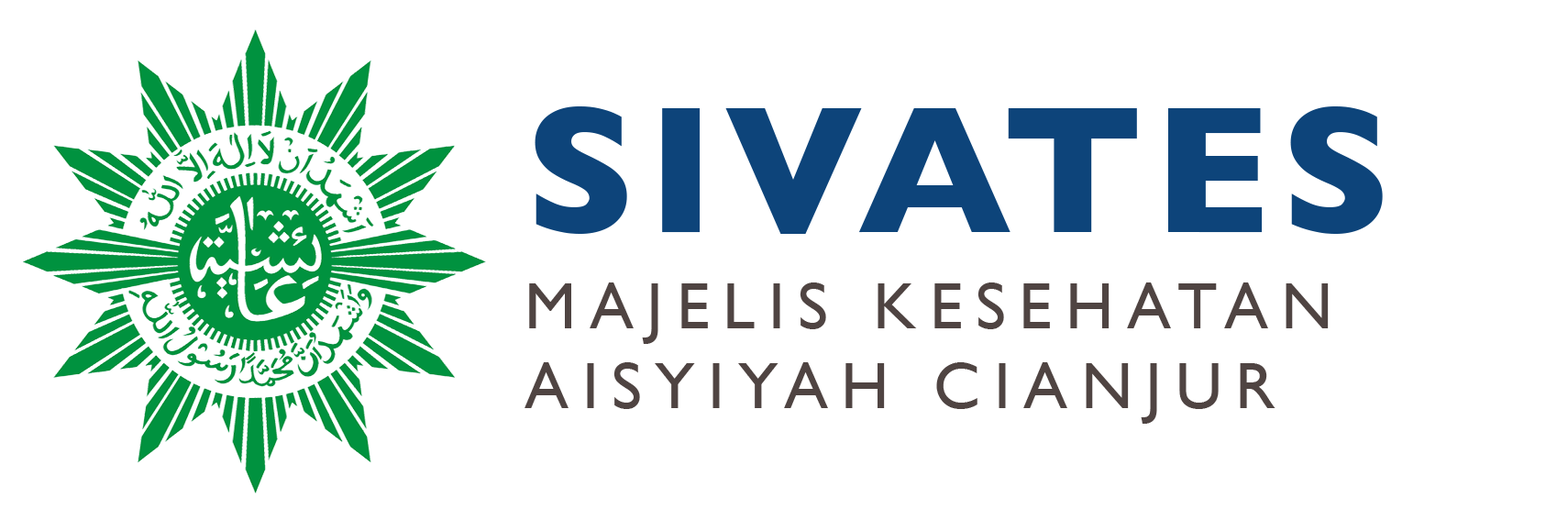
<style>
.page{position:relative;width:1568px;height:520px;background:#ffffff}
.page>*{position:absolute;margin:0}
.t1{font:183.4px "GillSans-Bold";letter-spacing:0.05em;color:#0d447a}
.t2{font:66px "GillSans";letter-spacing:0.2em;color:#4f4442}
</style>
<div class="page">
<p class="t1" style="left:535px;top:106px;width:848px;height:128px">SIVATES</p>
<p class="t2" style="left:525px;top:282px;width:804px;height:142px">MAJELIS KESEHATAN<br>AISYIYAH CIANJUR</p>
</div>
